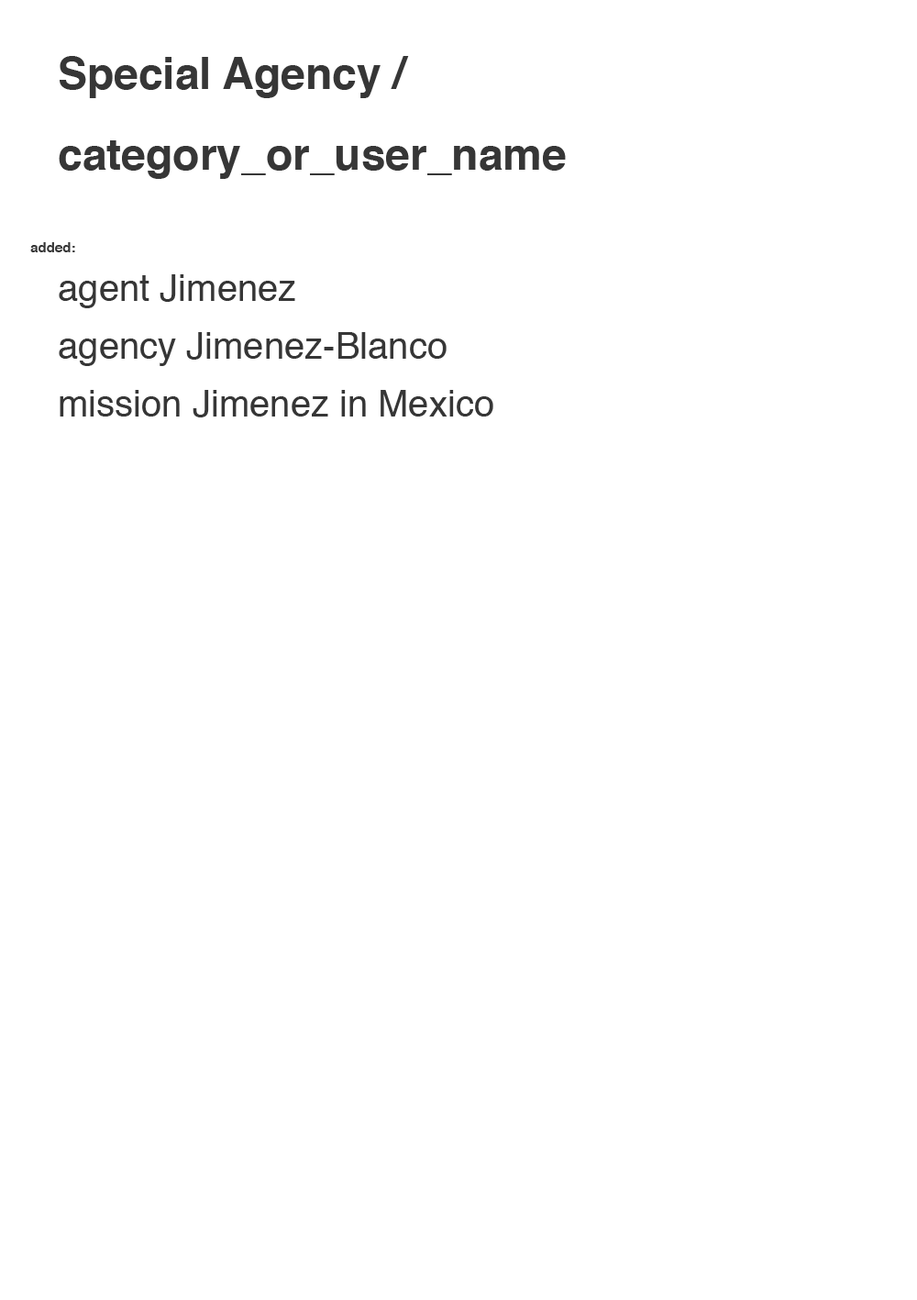
<style>
.page{position:relative;width:917px;height:1300px;background:#ffffff}
.page>*{position:absolute;margin:0}
.t1{font:44px "Helvetica-Bold";color:#363636}
.t2{font:13.8px "Helvetica-Bold";color:#363636}
.t3{font:36.7px/57.8px "Helvetica";color:#363636}
</style>
<div class="page">
<p class="t1" style="left:60px;top:56px;width:349px;height:42px">Special Agency /</p>
<p class="t1" style="left:59px;top:140px;width:507px;height:39px">category_or_user_name</p>
<p class="t2" style="left:30px;top:242px;width:45px;height:10px">added:</p>
<p class="t3" style="left:59px;top:274px;width:435px;height:143px">agent Jimenez<br>agency Jimenez-Blanco<br>mission Jimenez in Mexico</p>
</div>
